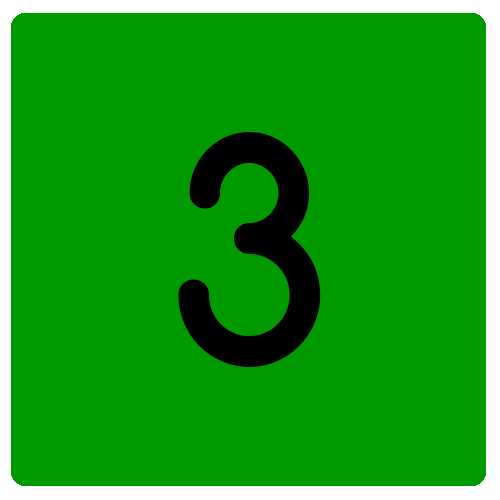
<style>
.page{position:relative;width:500px;height:500px;background:#009900}
.page>*{position:absolute;margin:0}
.t1{font:300px "Comfortaa-Bold";color:#000000}
</style>
<div class="page">
<p class="t1" style="left:178px;top:132px;width:143px;height:235px">3</p>
</div>
